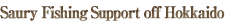
<style>
.page{position:relative;width:236px;height:26px;background:#ffffff}
.page>*{position:absolute;margin:0}
.t1{font:16px "RyuminPro-ExBold";letter-spacing:-0.08em;color:#6d5940;font-weight:bold;scale:0.9 1}
</style>
<div class="page">
<p class="t1" style="left:0px;top:6px;width:225px;height:15px">Saury Fishing Support off Hokkaido</p>
</div>
